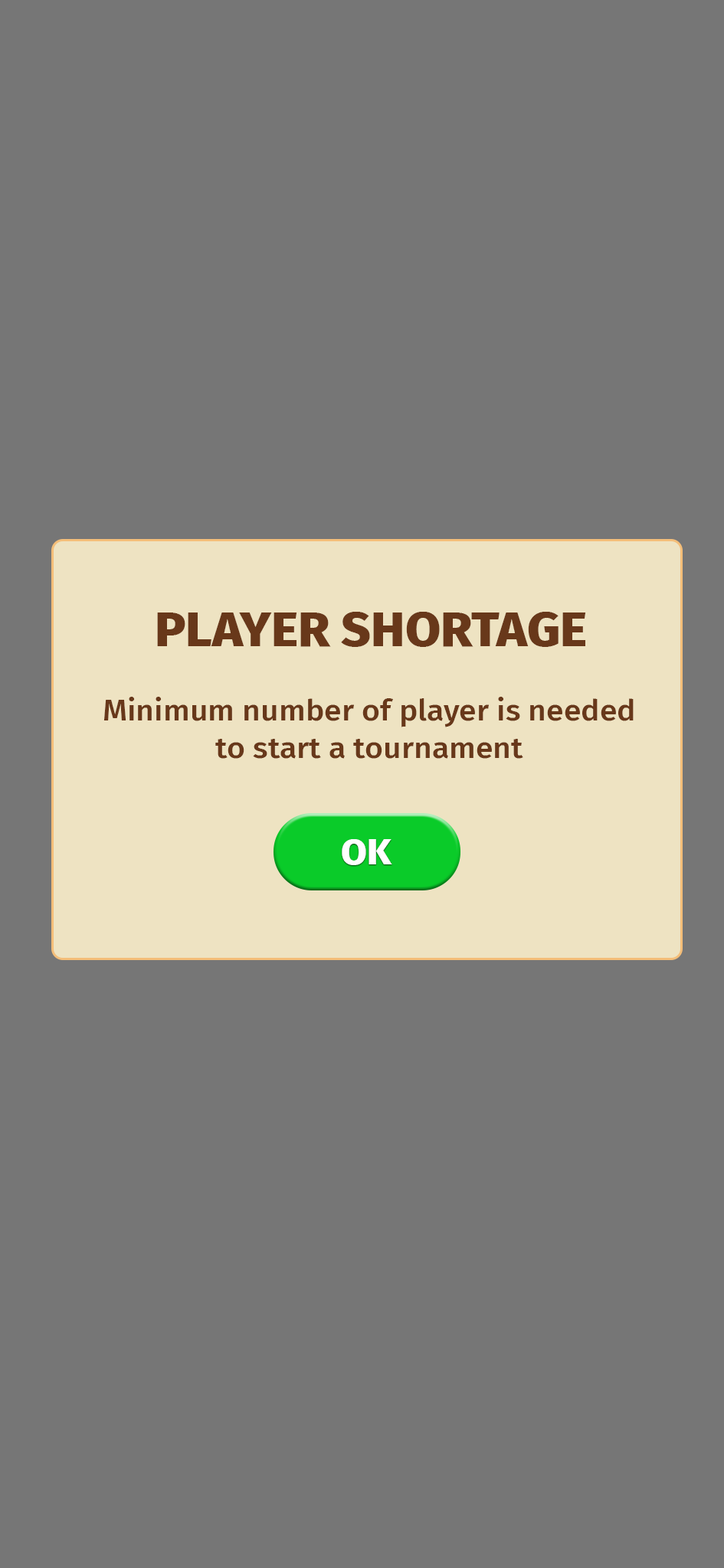
<style>
.page{position:relative;width:724px;height:1568px;background:#767676}
.page>*{position:absolute;margin:0}
.t1{font:48.7px "FiraSans-ExtraBold";color:#68381a;scale:1.05 1}
.t2{font:29.8px "FiraSans-Medium";color:#68381a;scale:1.05 1}
.t3{font:35.6px "FiraSans-ExtraBold";color:#ffffff;scale:1.05 1}
</style>
<div class="page">
<p class="t1" style="left:157px;top:612px;width:429px;height:35px">PLAYER SHORTAGE</p>
<p class="t2" style="left:103px;top:697px;width:530px;height:62px;text-align:center">Minimum number of player is needed<br>to start a tournament</p>
<p class="t3" style="left:341px;top:839px;width:51px;height:26px">OK</p>
</div>
